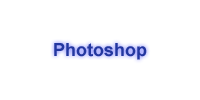
<style>
.page{position:relative;width:200px;height:100px;background:#ffffff}
.page>*{position:absolute;margin:0}
.t1{font:18px "Arial-BoldMT";color:#2337a0}
</style>
<div class="page">
<p class="t1" style="left:54px;top:43px;width:93px;height:17px">Photoshop</p>
</div>
